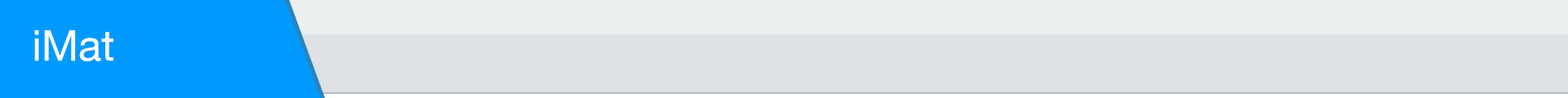
<style>
.page{position:relative;width:1568px;height:98px;background:#dee2e4}
.page>*{position:absolute;margin:0}
.t1{font:42.5px "HelveticaNeueLTPro-Roman";color:#ffffff}
</style>
<div class="page">
<p class="t1" style="left:34px;top:30px;width:80px;height:31px">iMat</p>
</div>
